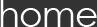
<style>
.page{position:relative;width:97px;height:27px;background:#333333}
.page>*{position:absolute;margin:0}
.t1{font:36px "CenturyGothic";letter-spacing:-0.03em;color:#ffffff}
</style>
<div class="page">
<p class="t1" style="left:0px;top:0px;width:97px;height:27px">home</p>
</div>
